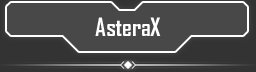
<style>
.page{position:relative;width:256px;height:72px;background:#484848}
.page>*{position:absolute;margin:0}
.t1{font:24px "AgencyFB-Bold";color:#ffffff}
</style>
<div class="page">
<p class="t1" style="left:95px;top:17px;width:66px;height:19px">AsteraX</p>
</div>
